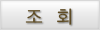
<style>
.page{position:relative;width:100px;height:30px}
.page>*{position:absolute;margin:0}
.t1{font:18px "YGO125";color:#5d4a24}
</style>
<div class="page">
<p class="t1" style="left:25px;top:8px;width:47px;height:17px">조  회</p>
</div>
